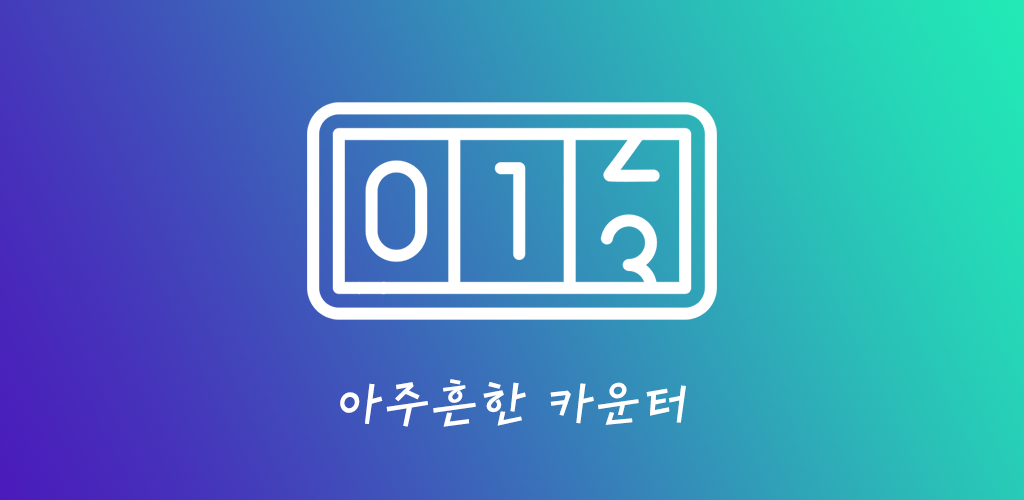
<style>
.page{position:relative;width:1024px;height:500px}
.page>*{position:absolute;margin:0}
.t1{font:48px "MapoMaponaru";color:#ffffff}
</style>
<div class="page">
<p class="t1" style="left:340px;top:379px;width:346px;height:48px">아주흔한 카운터</p>
</div>
